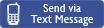
<style>
.page{position:relative;width:104px;height:28px;background:#395296}
.page>*{position:absolute;margin:0}
.t1{font:11.5px/11.4px "GillSansMT";color:#ffffff}
</style>
<div class="page">
<p class="t1" style="left:30px;top:4px;width:63px;height:22px;text-align:center">Send via<br>Text Message</p>
</div>
